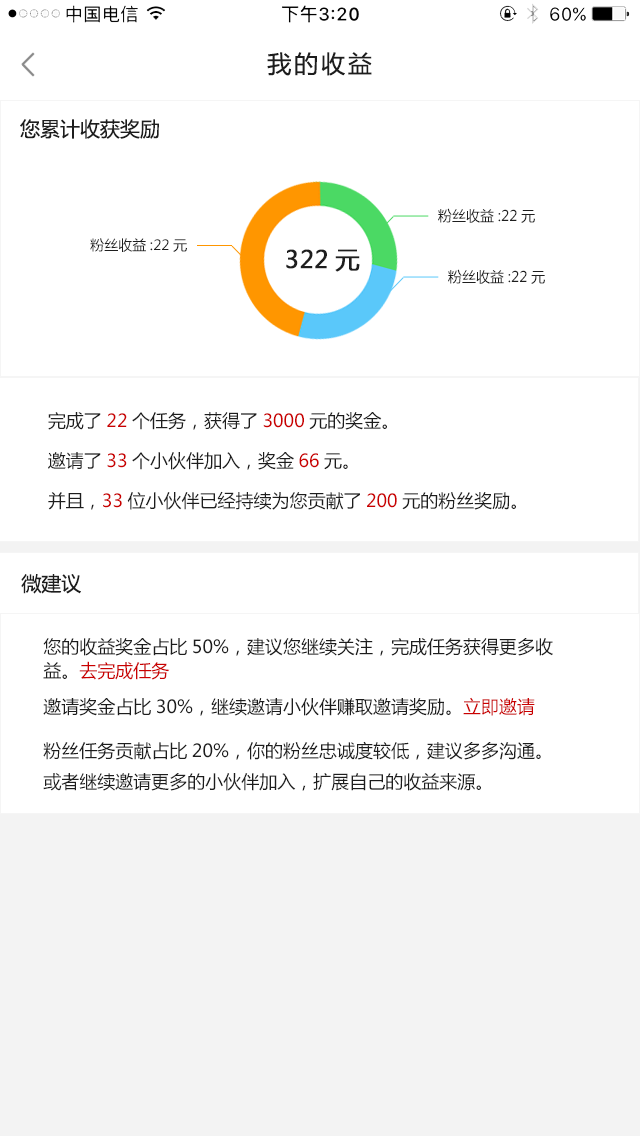
<style>
.page{position:relative;width:640px;height:1136px;background:#ffffff}
.page>*{position:absolute;margin:0}
.t1{font:24px "MicrosoftYaHei";letter-spacing:0.12em;color:#1d1d1d;font-variant:small-caps}
.t2{font:20px "MicrosoftYaHei";color:#1d1d1d}
.t3{font:14.4px "MicrosoftYaHei";color:#1e1e1e}
.t4{font:14px "MicrosoftYaHei";color:#1e1e1e}
.t5{font:24px "MicrosoftYaHei";color:#1e1e1e;font-weight:bold}
.t6{font:18px/40px "MicrosoftYaHei";color:#1d1d1d}
.t7{font:18px/40px "MicrosoftYaHei";color:#ca0000}
.t8{font:18px "MicrosoftYaHei";color:#1d1d1d}
.t9{font:18px/24px "MicrosoftYaHei";color:#1d1d1d}
.t10{font:18px/24px "MicrosoftYaHei";color:#ca0000}
.t11{font:18px/12px "MicrosoftYaHei";color:#ca0000}
</style>
<div class="page">
<p class="t1" style="left:267px;top:52px;width:105px;height:24px">我的收益</p>
<p class="t2" style="left:20px;top:119px;width:139px;height:20px">您累计收获奖励</p>
<p class="t3" style="left:438px;top:208px;width:97px;height:15px">粉丝收益:22元</p>
<p class="t4" style="left:90px;top:238px;width:97px;height:14px">粉丝收益:22元</p>
<p class="t5" style="left:286px;top:249px;width:74px;height:23px">322元</p>
<p class="t3" style="left:448px;top:269px;width:97px;height:15px">粉丝收益:22元</p>
<p class="t6" style="left:48px;top:412px;width:468px;height:98px">完成了<span class="t7">22</span>个任务，获得了<span class="t7">3000</span>元的奖金。<br>邀请了<span class="t7">33</span>个小伙伴加入，奖金<span class="t7">66</span>元。<br>并且，<span class="t7">33</span>位小伙伴已经持续为您贡献了<span class="t7">200</span>元的粉丝奖励。</p>
<p class="t2" style="left:21px;top:574px;width:60px;height:20px">微建议</p>
<p class="t8" style="left:43px;top:638px;width:510px;height:153px"><span class="t9">您的收益奖金占比50%，建议您继续关注，完成任务获得更多收益。</span><span class="t10">去完成</span><span class="t11">任务<br><br></span>邀请奖金占比30%，继续邀请小伙伴赚取邀请奖励。<span class="t11">立即邀请<br><br></span>粉丝任务贡献占比20%，你的粉丝忠诚度较低，建议多多沟通。或者继续邀请更多的小伙伴加入，扩展自己的收益来源。</p>
</div>
